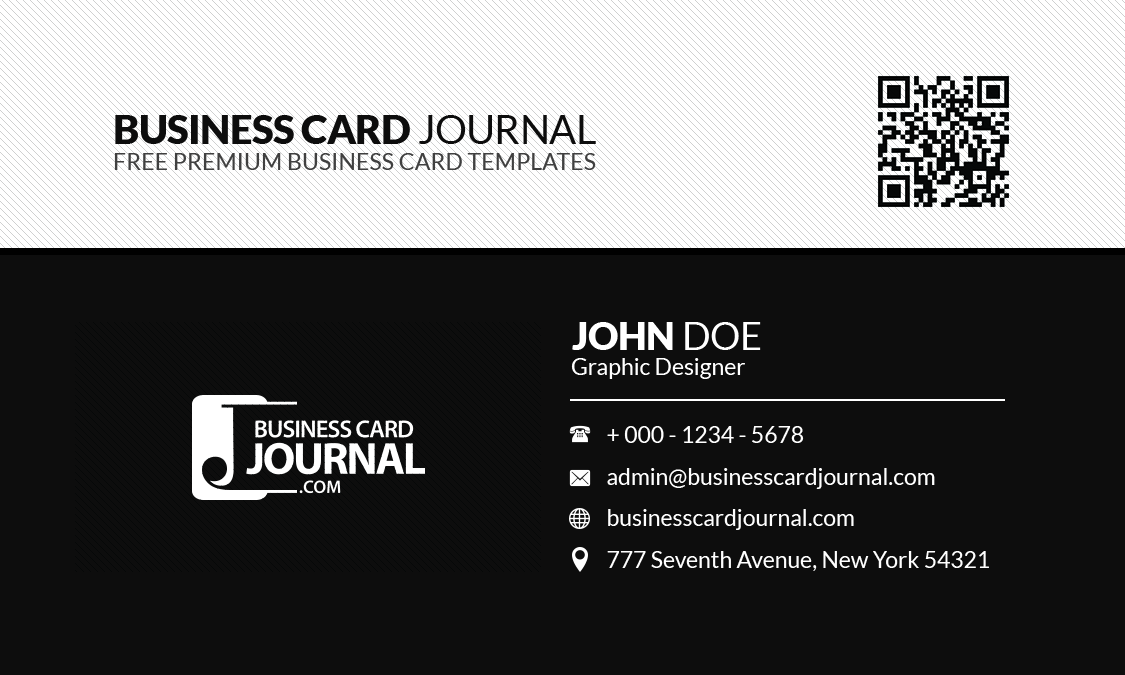
<style>
.page{position:relative;width:1125px;height:675px;background:#0d0d0d}
.page>*{position:absolute;margin:0}
.t1{font:39.6px "Lato-Black";letter-spacing:-0.01em;color:#0d0d0d;text-transform:uppercase}
.t2{font:39.6px "Lato-Regular";letter-spacing:-0.01em;color:#0d0d0d;text-transform:uppercase}
.t3{font:22.9px "Lato-Regular";letter-spacing:0.005em;color:#404040;text-transform:uppercase}
.t4{font:37.5px "Lato-Black";color:#ffffff;text-transform:uppercase}
.t5{font:37.5px "Lato-Regular";color:#ffffff;text-transform:uppercase}
.t6{font:22.9px "Lato-Regular";color:#ffffff}
.t7{font:22.9px/41.7px "Lato-Regular";color:#ffffff}
</style>
<div class="page">
<p class="t1" style="left:115px;top:115px;width:481px;height:29px">Business Card <span class="t2">Journal</span></p>
<p class="t3" style="left:114px;top:153px;width:482px;height:17px">Free Premium Business Card Templates</p>
<p class="t4" style="left:572px;top:322px;width:189px;height:28px">John <span class="t5">Doe</span></p>
<p class="t6" style="left:571px;top:358px;width:174px;height:21px">Graphic Designer</p>
<p class="t7" style="left:607px;top:426px;width:382px;height:145px">+ 000 - 1234 - 5678<br>admin@businesscardjournal.com<br>businesscardjournal.com<br>777 Seventh Avenue, New York 54321</p>
</div>
